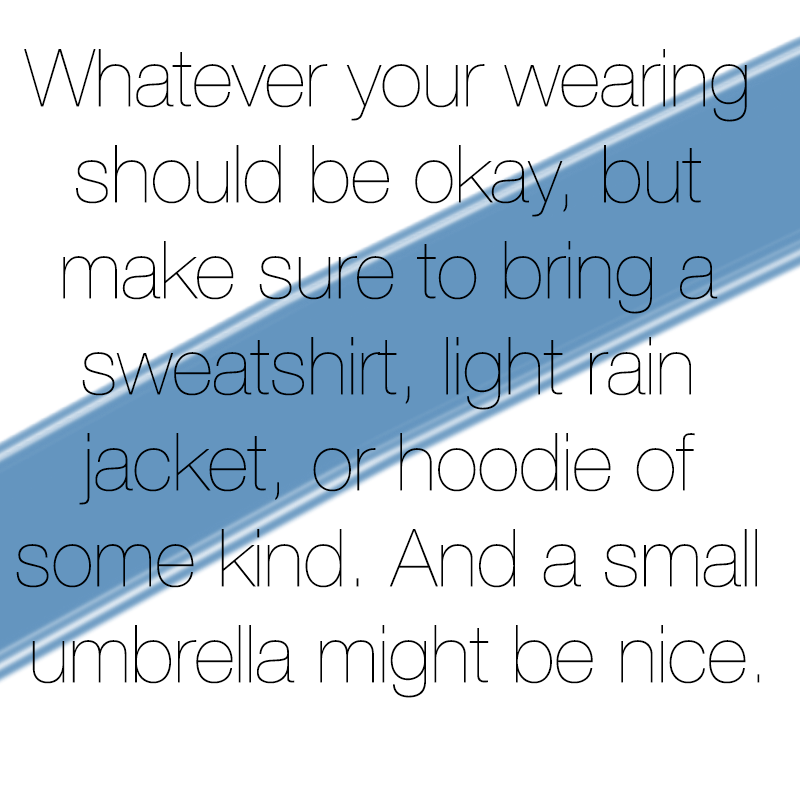
<style>
.page{position:relative;width:800px;height:800px;background:#ffffff}
.page>*{position:absolute;margin:0}
.t1{font:80px "HelveticaNeue-UltraLight";color:#000000}
</style>
<div class="page">
<p class="t1" style="left:16px;top:49px;width:744px;height:649px;text-align:center">Whatever your wearing <br>should be okay, but <br>make sure to bring a <br>sweatshirt, light rain <br>jacket, or hoodie of <br>some kind. And a small <br>umbrella might be nice.</p>
</div>
